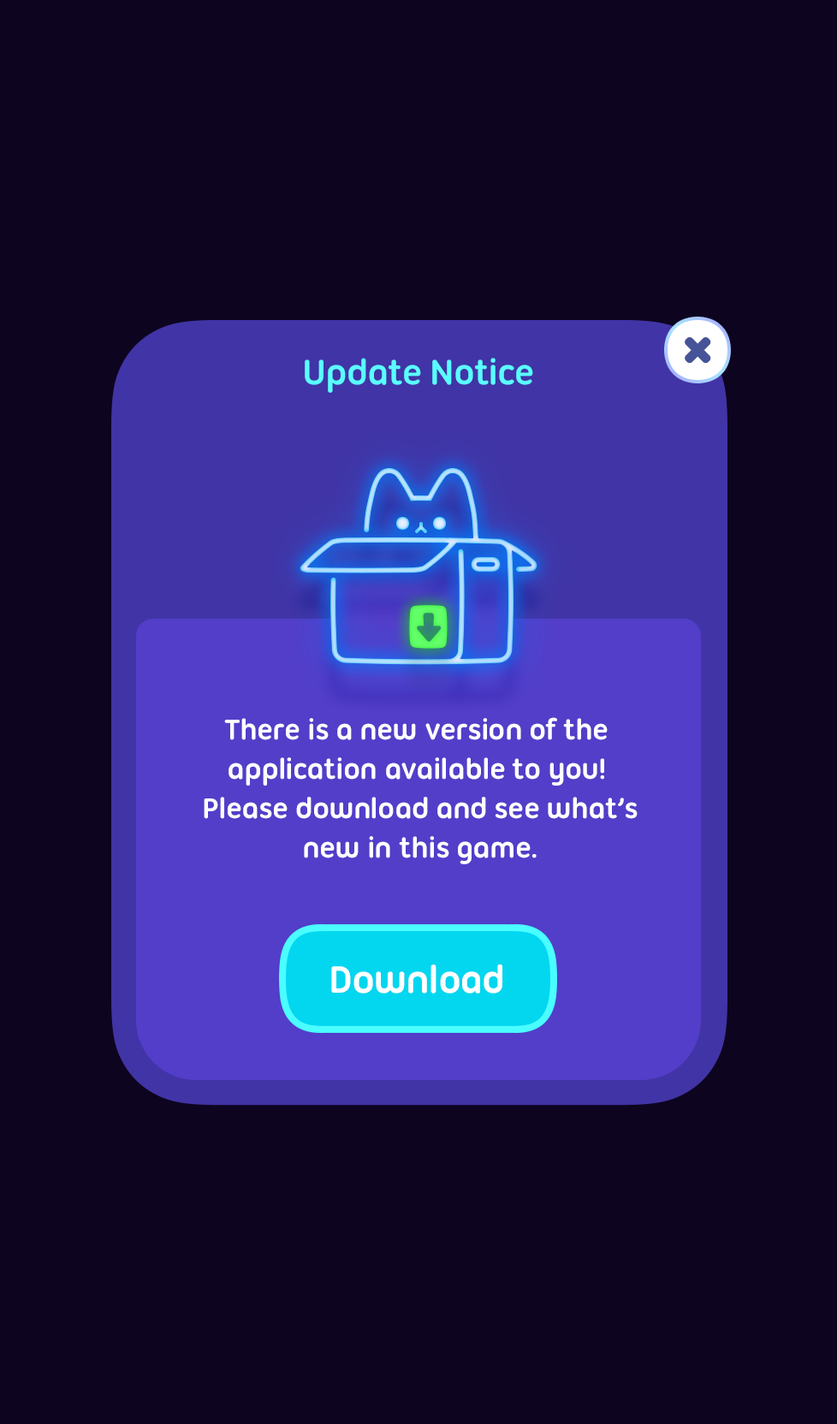
<style>
.page{position:relative;width:837px;height:1424px;background:#0d0420}
.page>*{position:absolute;margin:0}
.t1{font:37.7px "UbuntuTitling-Bold";letter-spacing:-0.025em;color:#5afdff}
.t2{font:30.8px/39.4px "UbuntuTitling-Bold";letter-spacing:-0.025em;color:#ffffff}
.t3{font:41.1px "UbuntuTitling-Bold";letter-spacing:-0.025em;color:#ffffff}
</style>
<div class="page">
<p class="t1" style="left:305px;top:358px;width:228px;height:35px">Update Notice</p>
<p class="t2" style="left:204px;top:717px;width:434px;height:148px;text-align:center">There is a new version of the <br>application available to you! <br>Please download and see what’s<br>new in this game.</p>
<p class="t3" style="left:331px;top:965px;width:171px;height:29px">Download</p>
</div>
